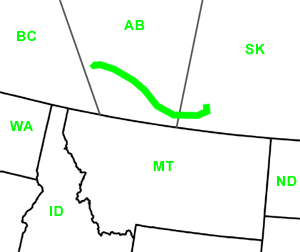
<style>
.page{position:relative;width:300px;height:252px;background:#ffffff}
.page>*{position:absolute;margin:0}
.t1{font:14px "Arial-BoldMT";letter-spacing:0.05em;color:#00ff00}
</style>
<div class="page">
<p class="t1" style="left:17px;top:30px;width:19px;height:11px">BC</p>
<p class="t1" style="left:124px;top:20px;width:21px;height:10px">AB</p>
<p class="t1" style="left:245px;top:43px;width:20px;height:12px">SK</p>
<p class="t1" style="left:10px;top:121px;width:23px;height:10px">WA</p>
<p class="t1" style="left:153px;top:161px;width:21px;height:10px">MT</p>
<p class="t1" style="left:277px;top:176px;width:20px;height:10px">ND</p>
<p class="t1" style="left:50px;top:206px;width:13px;height:10px">ID</p>
</div>
